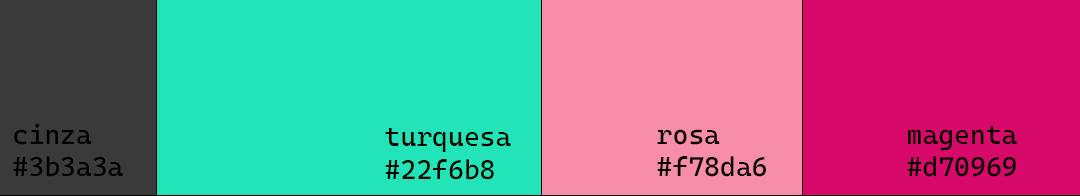
<style>
.page{position:relative;width:1080px;height:196px;background:#22e4b8}
.page>*{position:absolute;margin:0}
.t1{font:27px "CascadiaMono-Roman";color:#000000;font-weight:bold}
.t2{font:27px "CascadiaMono-Roman";color:#ae5582;font-weight:bold}
</style>
<div class="page">
<p class="t1" style="left:13px;top:123px;width:110px;height:54px">cinza<br>#3b3a3a</p>
<p class="t1" style="left:907px;top:126px;width:110px;height:51px">magenta<br>#d70969</p>
<p class="t1" style="left:385px;top:128px;width:126px;height:52px"><span class="t2"><br></span>turquesa<br>#22f6b8</p>
<p class="t1" style="left:657px;top:129px;width:109px;height:48px">rosa<br>#f78da6</p>
</div>
